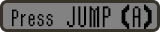
<style>
.page{position:relative;width:160px;height:32px;background:#838282}
.page>*{position:absolute;margin:0}
.t1{font:30px "ReturnOfGanonReg";color:#000000}
.t2{font:24px "ReturnOfGanonReg";color:#000000}
</style>
<div class="page">
<p class="t1" style="left:67px;top:4px;width:85px;height:25px">JUMP (A)</p>
<p class="t2" style="left:12px;top:9px;width:41px;height:18px">Press</p>
</div>
